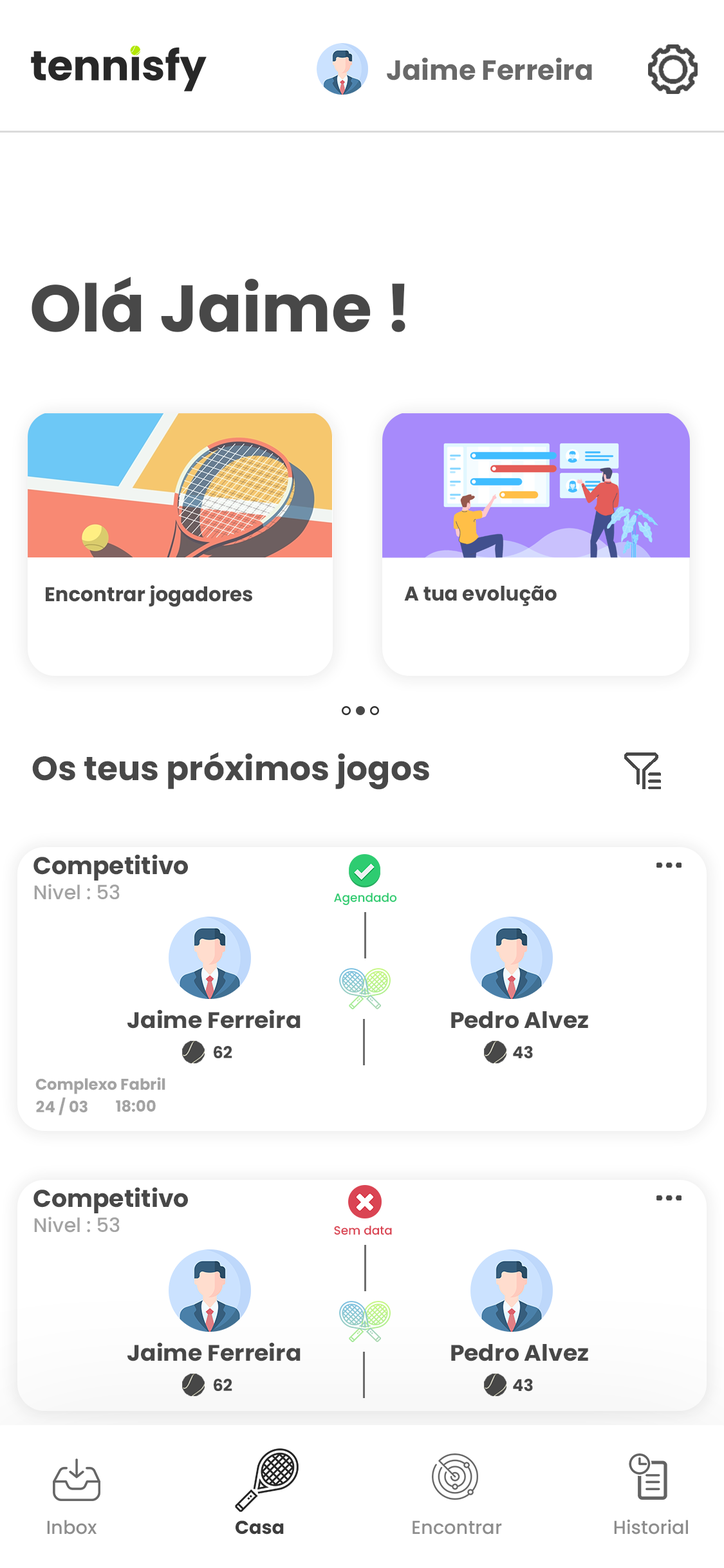
<style>
.page{position:relative;width:724px;height:1568px;background:#ffffff}
.page>*{position:absolute;margin:0}
.t1{font:27.7px "Poppins-Bold";color:#696969}
.t2{font:65.8px "Poppins-Bold";color:#484848}
.t3{font:19.9px "Poppins-Bold";color:#484848}
.t4{font:33.5px "Poppins-Bold";color:#484848}
.t5{font:24.3px "Poppins-Bold";color:#484848}
.t6{font:19.7px "Poppins-Medium";color:#a3a3a3}
.t7{font:11.9px "Poppins-Medium";color:#2ecc71}
.t8{font:22.5px "Poppins-Bold";color:#484848;scale:1.04 1}
.t9{font:16.4px "Poppins-Bold";color:#484848}
.t10{font:15.5px "Poppins-Bold";color:#a3a3a3}
.t11{font:11.9px "Poppins-Medium";color:#da4453}
.t12{font:18.7px "Poppins-Medium";color:#8d8d8d}
.t13{font:18.7px "Poppins-Bold";color:#3d3d3d}
</style>
<div class="page">
<p class="t1" style="left:387px;top:57px;width:205px;height:23px">Jaime Ferreira</p>
<p class="t2" style="left:32px;top:277px;width:374px;height:55px">Olá Jaime !</p>
<p class="t3" style="left:46px;top:585px;width:206px;height:22px">Encontrar jogadores</p>
<p class="t3" style="left:404px;top:585px;width:153px;height:21px">A tua evolução</p>
<p class="t4" style="left:32px;top:752px;width:397px;height:38px">Os teus próximos jogos</p>
<p class="t5" style="left:33px;top:854px;width:155px;height:27px">Competitivo</p>
<p class="t6" style="left:34px;top:884px;width:86px;height:16px">Nivel : 53</p>
<p class="t7" style="left:334px;top:893px;width:63px;height:13px">Agendado</p>
<p class="t8" style="left:127px;top:1010px;width:174px;height:19px">Jaime Ferreira</p>
<p class="t8" style="left:451px;top:1011px;width:137px;height:18px">Pedro Alvez</p>
<p class="t9" style="left:214px;top:1046px;width:18px;height:12px">62</p>
<p class="t9" style="left:513px;top:1046px;width:20px;height:13px">43</p>
<p class="t10" style="left:35px;top:1077px;width:130px;height:17px">Complexo Fabril</p>
<p class="t10" style="left:36px;top:1097px;width:52px;height:18px">24 / 03</p>
<p class="t10" style="left:116px;top:1100px;width:40px;height:12px">18:00</p>
<p class="t5" style="left:33px;top:1187px;width:155px;height:26px">Competitivo</p>
<p class="t6" style="left:34px;top:1217px;width:86px;height:16px">Nivel : 53</p>
<p class="t11" style="left:334px;top:1226px;width:58px;height:9px">Sem data</p>
<p class="t8" style="left:127px;top:1343px;width:174px;height:18px">Jaime Ferreira</p>
<p class="t8" style="left:451px;top:1344px;width:137px;height:17px">Pedro Alvez</p>
<p class="t9" style="left:214px;top:1379px;width:18px;height:12px">62</p>
<p class="t9" style="left:513px;top:1379px;width:20px;height:13px">43</p>
<p class="t12" style="left:47px;top:1520px;width:50px;height:15px">Inbox</p>
<p class="t13" style="left:236px;top:1520px;width:48px;height:15px">Casa</p>
<p class="t12" style="left:413px;top:1520px;width:89px;height:15px">Encontrar</p>
<p class="t12" style="left:614px;top:1519px;width:74px;height:16px">Historial</p>
</div>
